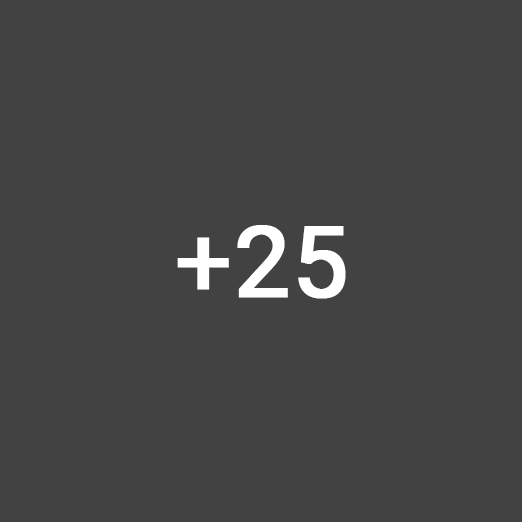
<style>
.page{position:relative;width:522px;height:522px;background:#424242}
.page>*{position:absolute;margin:0}
.t1{font:99px "Roboto-Regular";color:#ffffff;font-weight:bold}
</style>
<div class="page">
<p class="t1" style="left:177px;top:225px;width:169px;height:74px">+25</p>
</div>
